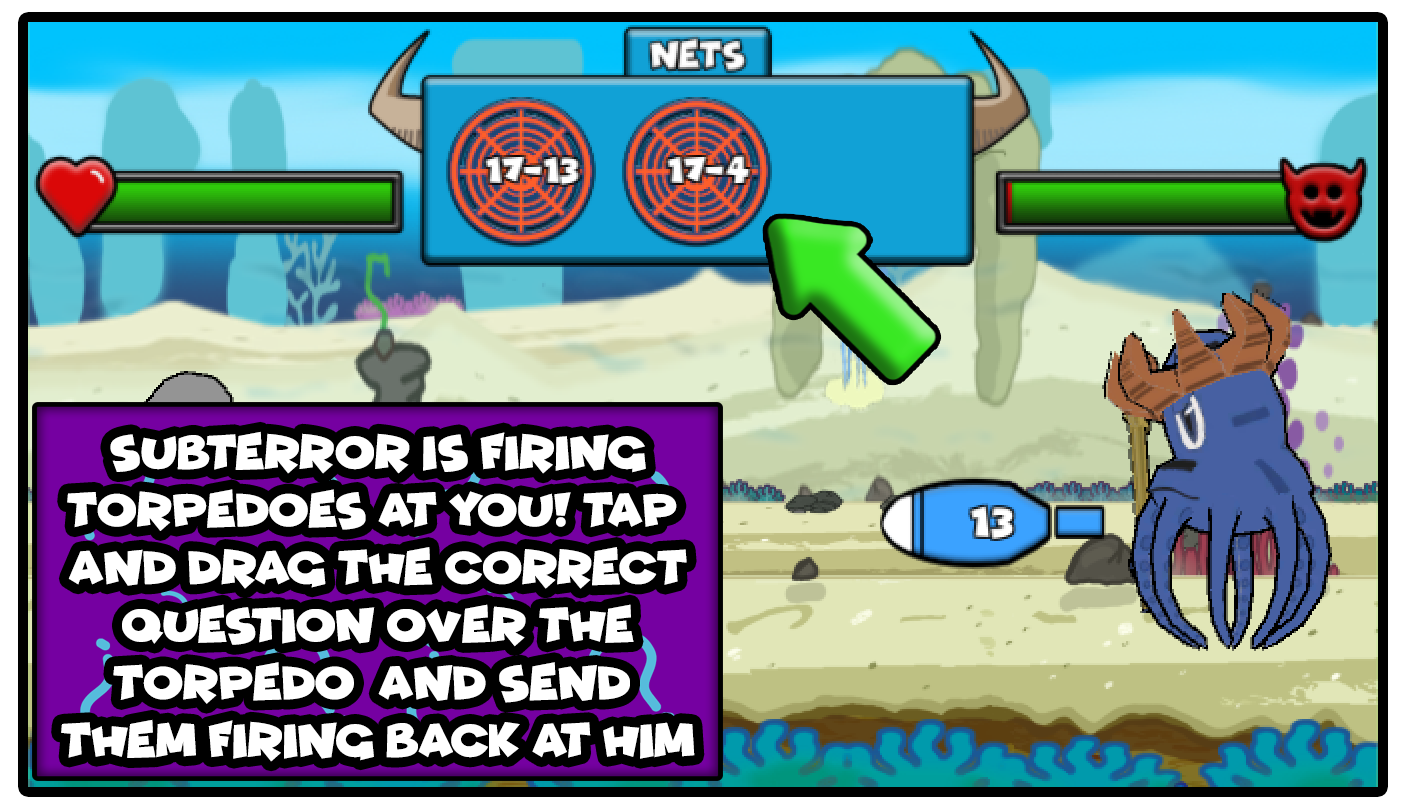
<style>
.page{position:relative;width:1402px;height:809px}
.page>*{position:absolute;margin:0}
.t1{font:48px "Funhouse";color:#ffffff}
</style>
<div class="page">
<p class="t1" style="left:61px;top:431px;width:634px;height:331px;text-align:center">SUBTERROR IS FIRING<br>TORPEDOES AT YOU! TAP <br>AND DRAG THE CORRECT<br> QUESTION OVER THE <br>TORPEDO  and send <br>them firing back at him</p>
</div>
